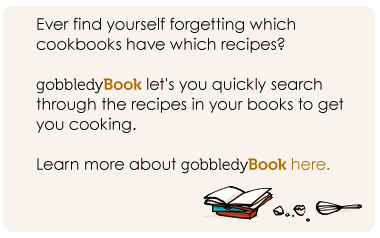
<style>
.page{position:relative;width:380px;height:238px;background:#f8f4ed}
.page>*{position:absolute;margin:0}
.t1{font:16px/20px "CenturyGothic";color:#020202}
.t2{font:16px/20px "Museo-300";color:#000000}
.t3{font:16px/20px "Museo-700";color:#b06c04}
.t4{font:16px/20px "CenturyGothic";color:#b06c04}
</style>
<div class="page">
<p class="t1" style="left:36px;top:17px;width:308px;height:157px">Ever find yourself forgetting which cookbooks have which recipes? <br><br><span class="t2">gobbledy</span><span class="t3">Book </span>let's you quickly search through the recipes in your books to get you cooking. <br><br>Learn more about <span class="t2">gobbledy</span><span class="t3">Book </span><span class="t4">here.</span></p>
</div>
